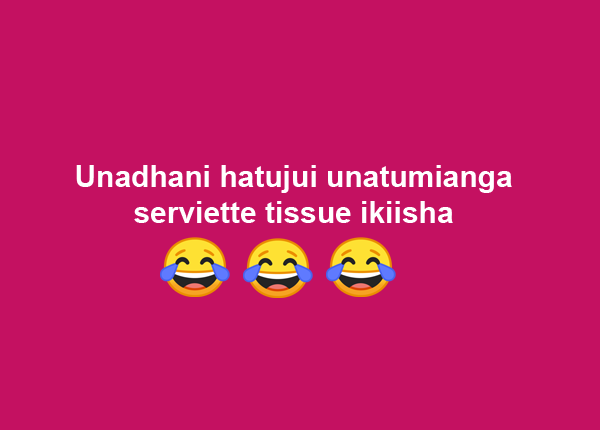
<style>
.page{position:relative;width:600px;height:430px;background:#c41161}
.page>*{position:absolute;margin:0}
.t1{font:30px "Arial-BoldMT";color:#ffffff}
</style>
<div class="page">
<p class="t1" style="left:76px;top:165px;width:436px;height:58px;text-align:center">Unadhani hatujui unatumianga <br>serviette tissue ikiisha</p>
</div>
